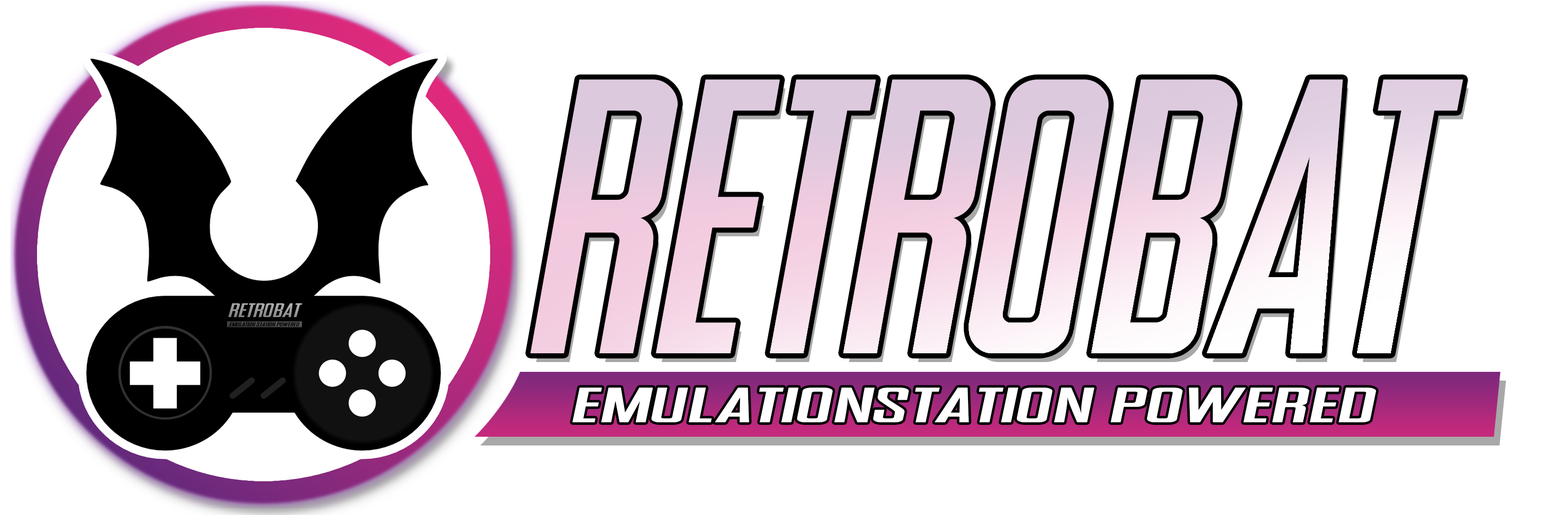
<style>
.page{position:relative;width:1568px;height:515px;background:#ffffff}
.page>*{position:absolute;margin:0}
.t1{font:390.8px "SNES-Italic"}
.t2{font:50.3px "SNES-Italic";color:#ffffff;scale:2.31 1}
</style>
<div class="page">
<p class="t1" style="left:530px;top:79px;width:933px;height:274px">RETROBAT</p>
<p class="t2" style="left:572px;top:387px;width:804px;height:35px">EMULATIONSTATION POWERED</p>
</div>
